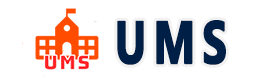
<style>
.page{position:relative;width:280px;height:80px;background:#ffffff}
.page>*{position:absolute;margin:0}
.t1{font:59.8px "SegoeUI-Bold";letter-spacing:0.145em;color:#001f46;font-weight:bold;scale:0.72 1}
</style>
<div class="page">
<p class="t1" style="left:117px;top:20px;width:109px;height:45px">UMS</p>
</div>
